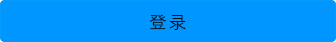
<style>
.page{position:relative;width:336px;height:42px;background:#0096ff}
.page>*{position:absolute;margin:0}
.t1{font:17.1px "STXihei";letter-spacing:0.159em;color:#0c0b0b}
</style>
<div class="page">
<p class="t1" style="left:150px;top:14px;width:36px;height:16px">登录</p>
</div>
